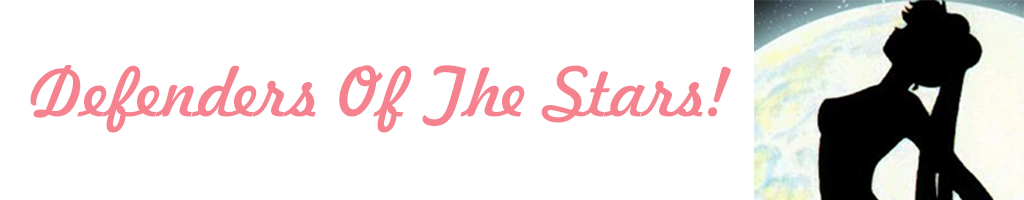
<style>
.page{position:relative;width:1024px;height:200px;background:#ffffff}
.page>*{position:absolute;margin:0}
.t1{font:66.7px "Freehand521BT-RegularC";color:#f5828f}
</style>
<div class="page">
<p class="t1" style="left:30px;top:65px;width:701px;height:68px">Defenders Of The Stars!</p>
</div>
